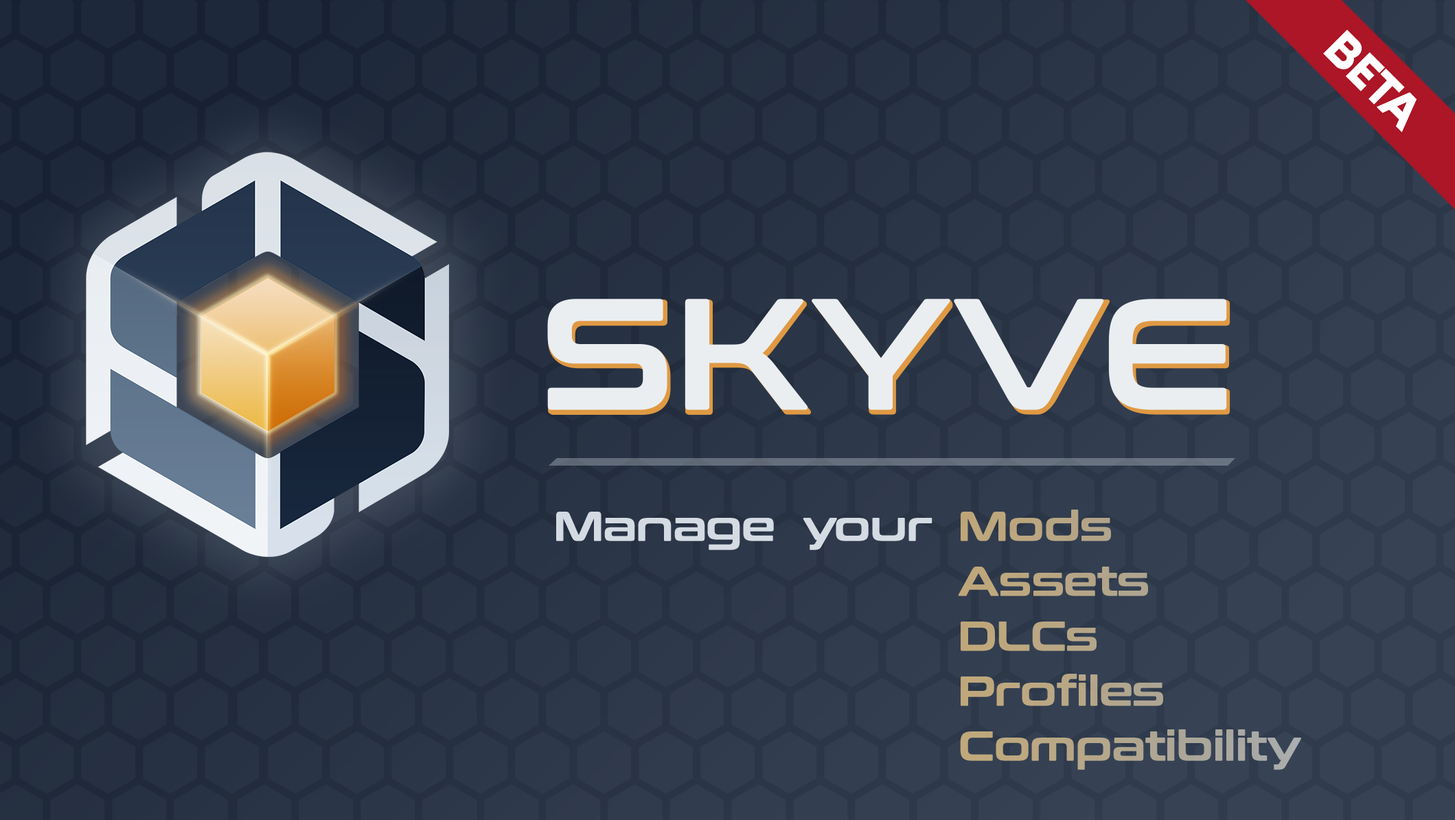
<style>
.page{position:relative;width:1455px;height:820px}
.page>*{position:absolute;margin:0}
.t1{font:41.2px/54.9px "ConthraxSb-Regular";letter-spacing:-0.02em;color:#b7a685;font-weight:bold}
.t2{font:41.2px "ConthraxSb-Regular";letter-spacing:-0.02em;color:#d4dbe3;font-weight:bold}
</style>
<div class="page">
<p class="t1" style="left:958px;top:509px;width:343px;height:261px">Mods<br>Assets<br>DLCs<br>Profiles<br>Compatibility</p>
<p class="t2" style="left:556px;top:511px;width:376px;height:39px">Manage  your</p>
</div>
